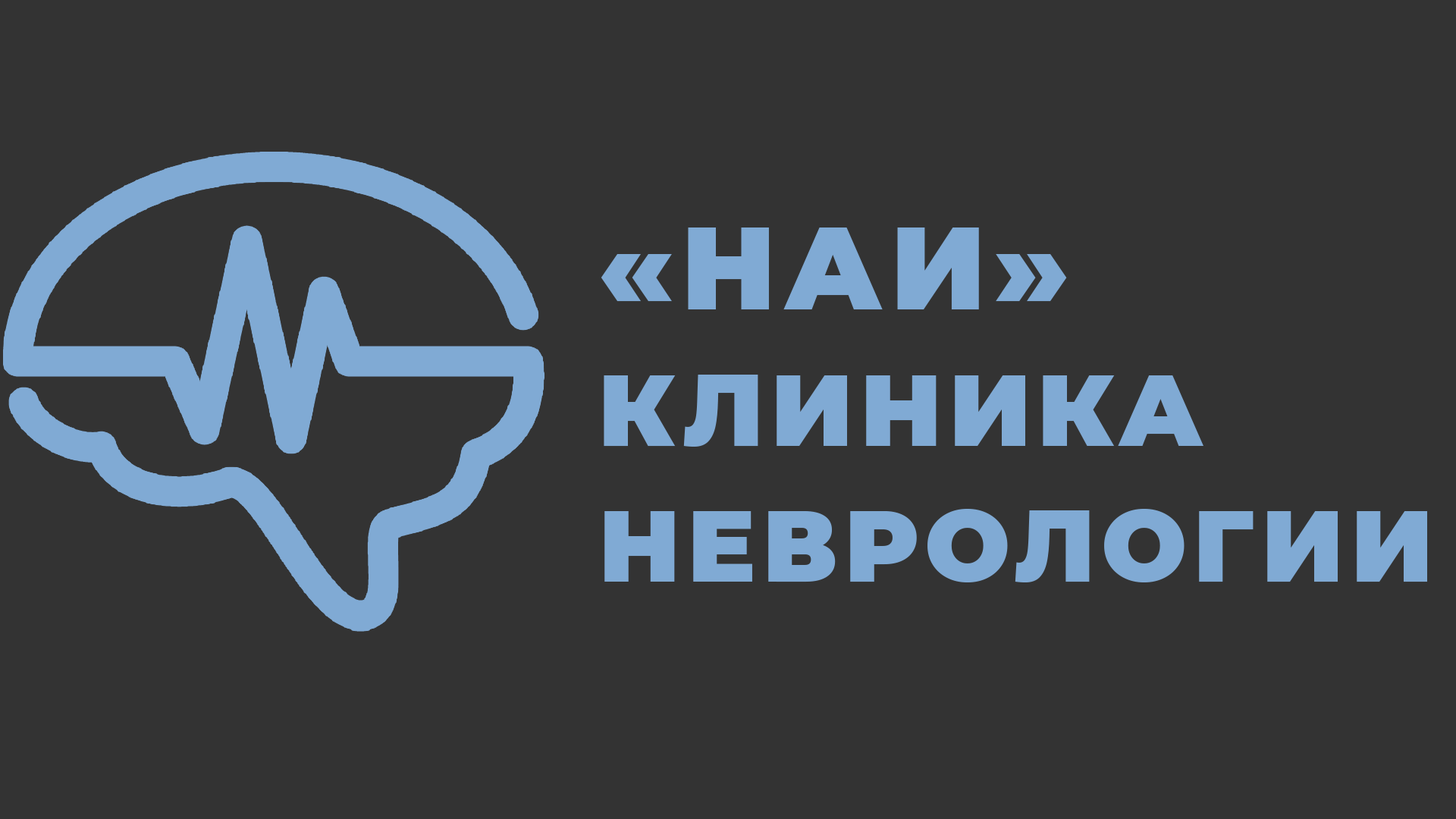
<style>
.page{position:relative;width:1456px;height:819px;background:#333333}
.page>*{position:absolute;margin:0}
.t1{font:101.1px/135.9px "Montserrat-Black";letter-spacing:0.064em;color:#80aad4}
.t2{font:116.9px/135.9px "Montserrat-Black";letter-spacing:0.064em;color:#80aad4}
</style>
<div class="page">
<p class="t1" style="left:601px;top:227px;width:826px;height:355px"><span class="t2">«НАИ»<br></span>КЛИНИКА <br>НЕВРОЛОГИИ</p>
</div>
